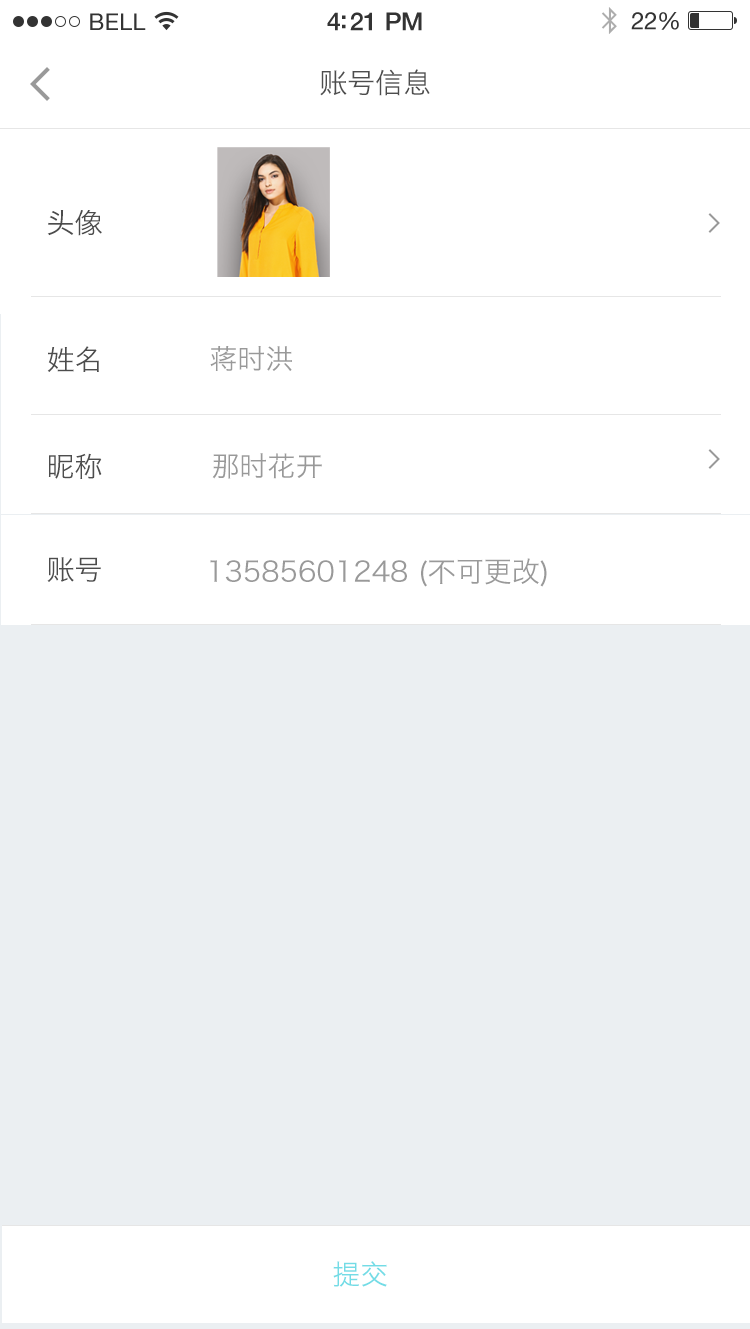
<style>
.page{position:relative;width:750px;height:1329px;background:#ffffff}
.page>*{position:absolute;margin:0}
.t1{font:28px "HiraginoSansGB-W3";color:#4d4d4d}
.t2{font:28px "HiraginoSansGB-W3";color:#4c4c4c}
.t3{font:28px "HiraginoSansGB-W3";color:#999999}
.t4{font:28px "HiraginoSansGB-W3";color:#73dce6}
</style>
<div class="page">
<p class="t1" style="left:320px;top:69px;width:110px;height:27px">账号信息</p>
<p class="t2" style="left:47px;top:210px;width:55px;height:26px">头像</p>
<p class="t1" style="left:47px;top:346px;width:52px;height:26px">姓名</p>
<p class="t3" style="left:210px;top:346px;width:82px;height:25px">蒋时洪</p>
<p class="t1" style="left:48px;top:453px;width:54px;height:26px">昵称</p>
<p class="t3" style="left:212px;top:453px;width:110px;height:26px">那时花开</p>
<p class="t2" style="left:47px;top:557px;width:54px;height:25px">账号</p>
<p class="t3" style="left:210px;top:558px;width:337px;height:29px">13585601248 (不可更改)</p>
<p class="t4" style="left:333px;top:1261px;width:54px;height:26px">提交</p>
</div>
